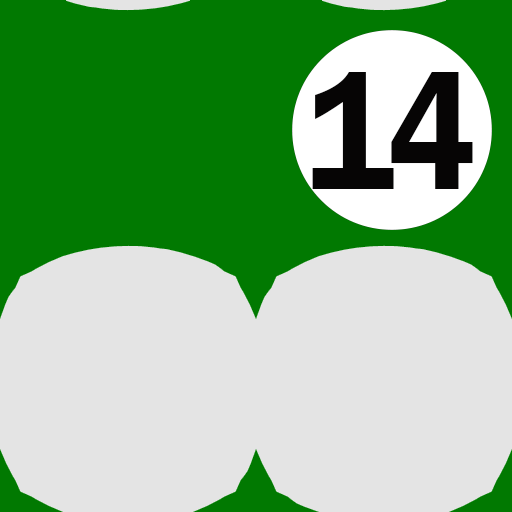
<style>
.page{position:relative;width:512px;height:512px;background:#e4e4e4}
.page>*{position:absolute;margin:0}
.t1{font:172.5px "FranklinGothic-Demi";letter-spacing:-0.05em;color:#060505;scale:0.87 1}
</style>
<div class="page">
<p class="t1" style="left:312px;top:72px;width:161px;height:117px">14</p>
</div>
